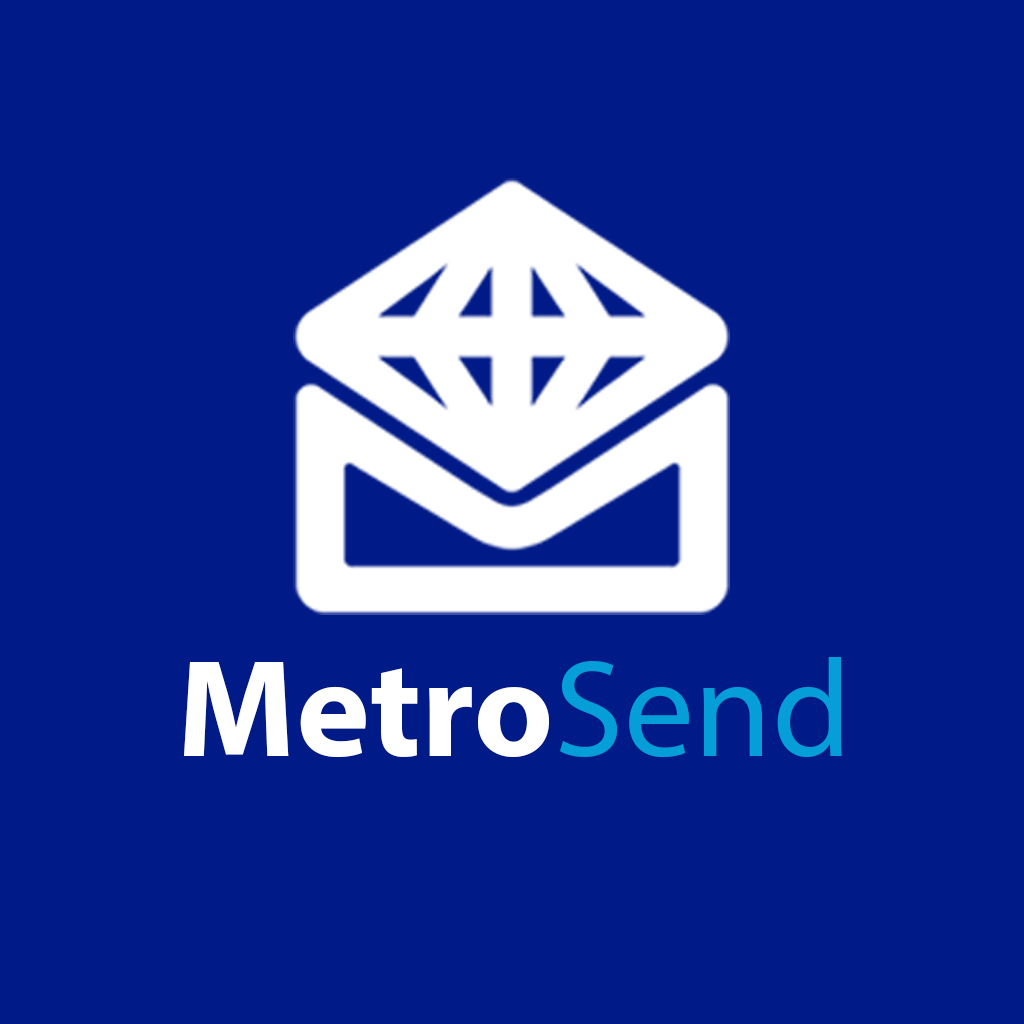
<style>
.page{position:relative;width:1024px;height:1024px;background:#001a88}
.page>*{position:absolute;margin:0}
.t1{font:140px "MyriadPro-Bold";color:#ffffff}
.t2{font:140px "MyriadPro-Regular";color:#059ed8}
</style>
<div class="page">
<p class="t1" style="left:184px;top:657px;width:658px;height:101px">Metro<span class="t2">Send</span></p>
</div>
